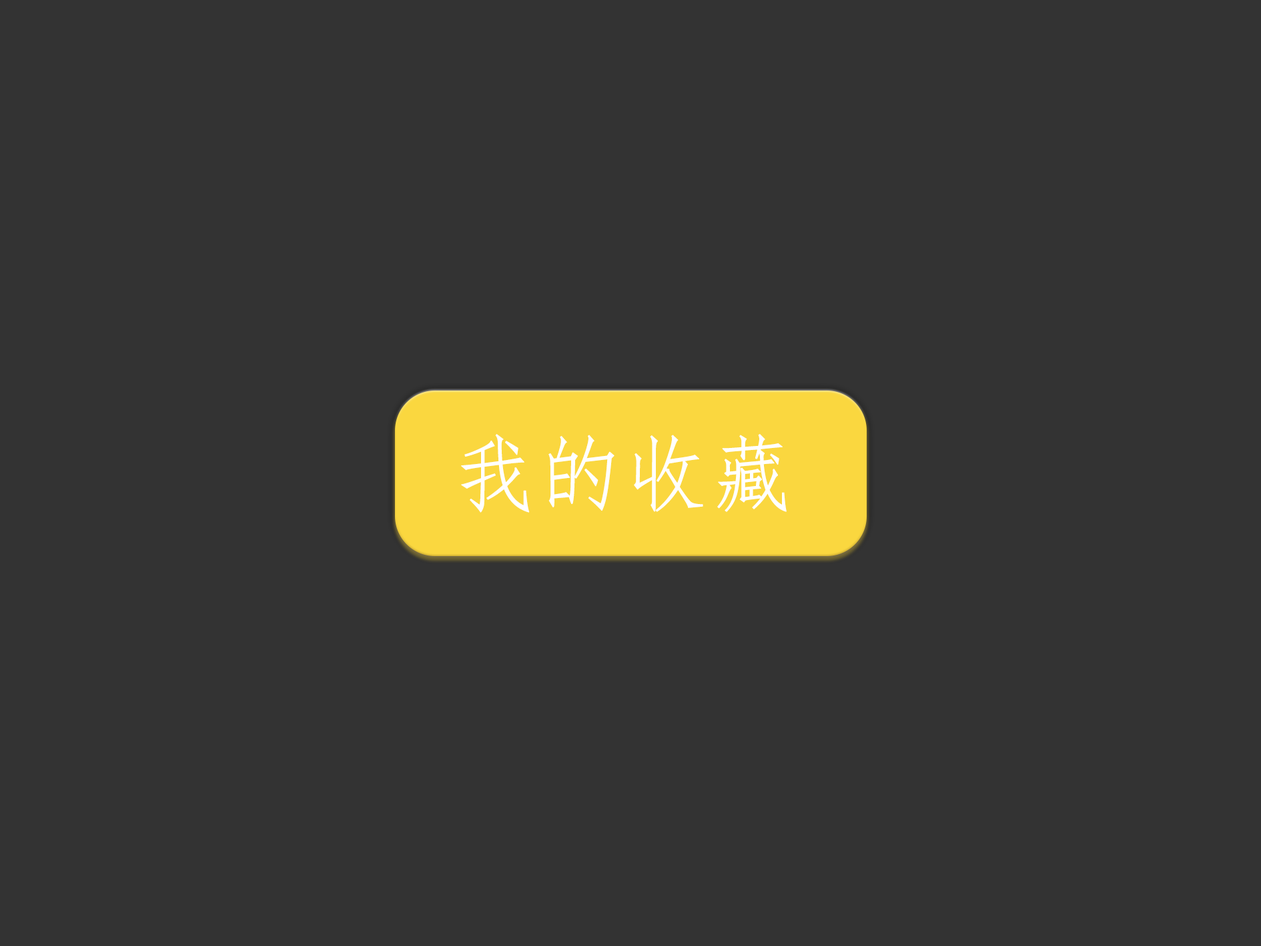
<style>
.page{position:relative;width:1261px;height:946px;background:#333333}
.page>*{position:absolute;margin:0}
.t1{font:83.4px "FangSong";color:#ffffff;font-weight:bold}
</style>
<div class="page">
<p class="t1" style="left:461px;top:434px;width:326px;height:78px">我的收藏</p>
</div>
